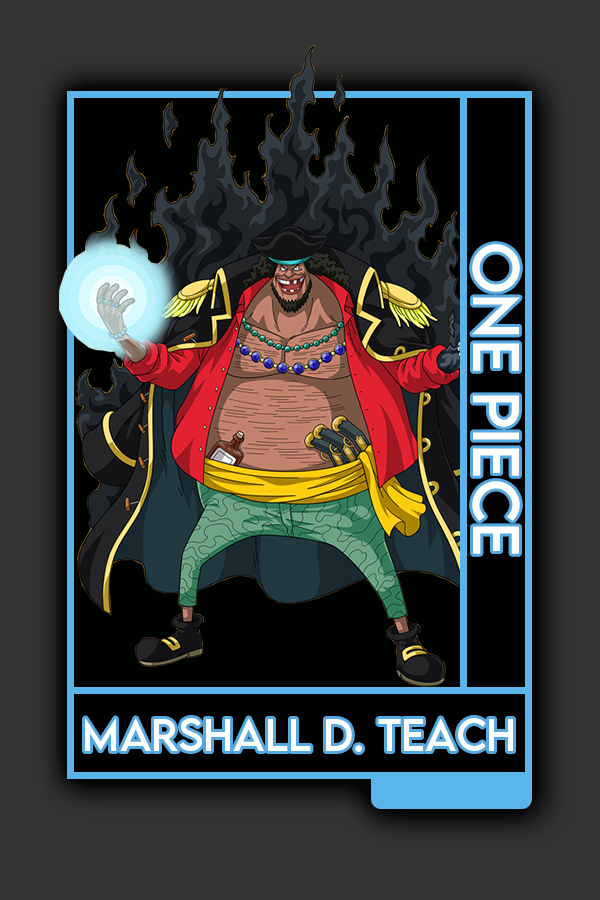
<style>
.page{position:relative;width:600px;height:900px;background:#333333}
.page>*{position:absolute;margin:0}
.t1{font:58.4px "LEMONMILK-Regular";color:#ffffff}
.t2{font:40.6px "LEMONMILK-Regular";color:#ffffff}
</style>
<div class="page">
<p class="t1" style="left:472px;top:244px;width:48px;height:310px;rotate:90deg">One Piece</p>
<p class="t2" style="left:85px;top:718px;width:428px;height:34px">Marshall D. Teach</p>
</div>
